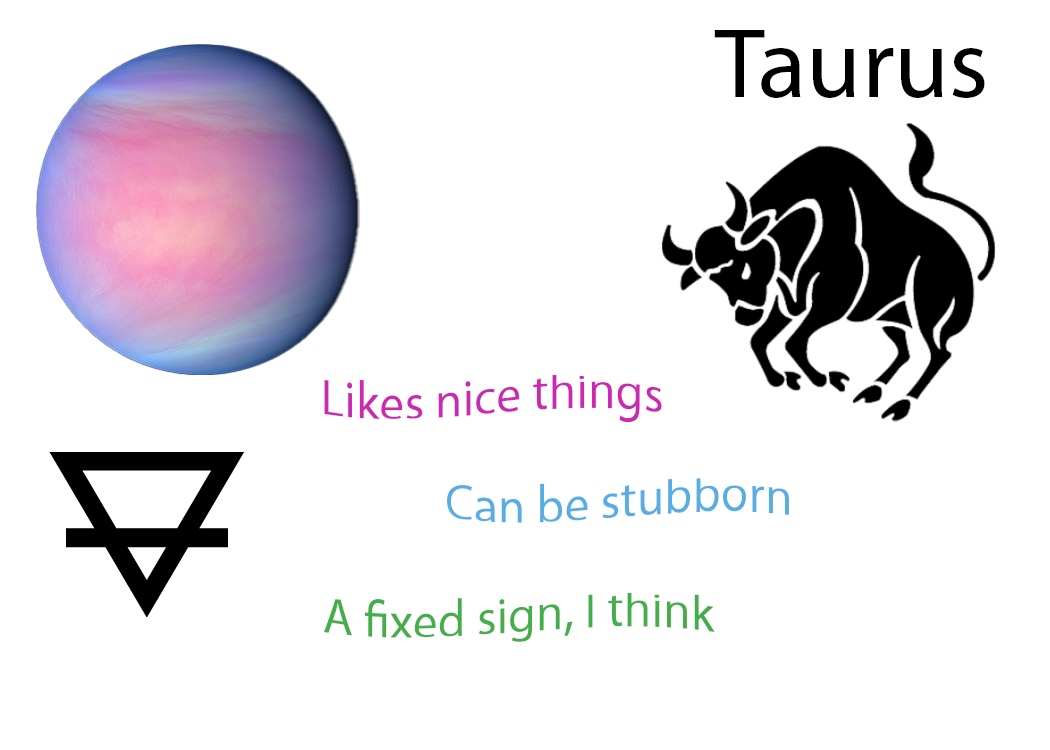
<style>
.page{position:relative;width:1050px;height:750px;background:#ffffff}
.page>*{position:absolute;margin:0}
.t1{font:100px "MyriadPro-Regular";color:#000000}
.t2{font:50px "MyriadPro-Regular";color:#ca29b1}
.t3{font:50px "MyriadPro-Regular";color:#58ade3}
.t4{font:50px "MyriadPro-Regular";color:#45ae4a}
</style>
<div class="page">
<p class="t1" style="left:714px;top:30px;width:271px;height:68px">Taurus</p>
<p class="t2" style="left:324px;top:375px;width:338px;height:48px">Likes nice things</p>
<p class="t3" style="left:447px;top:478px;width:342px;height:45px">Can be stubborn</p>
<p class="t4" style="left:324px;top:593px;width:391px;height:49px">A fixed sign, I think</p>
</div>
